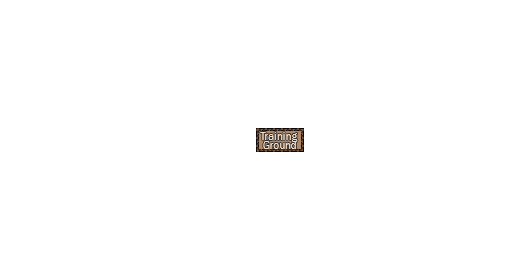
<style>
.page{position:relative;width:512px;height:256px;background:#ffffff}
.page>*{position:absolute;margin:0}
.t1{font:10.7px/9.3px "FranklinGothic-Book";color:#f8e0c8}
</style>
<div class="page">
<p class="t1" style="left:260px;top:132px;width:38px;height:17px;text-align:center">Training <br>Ground</p>
</div>
